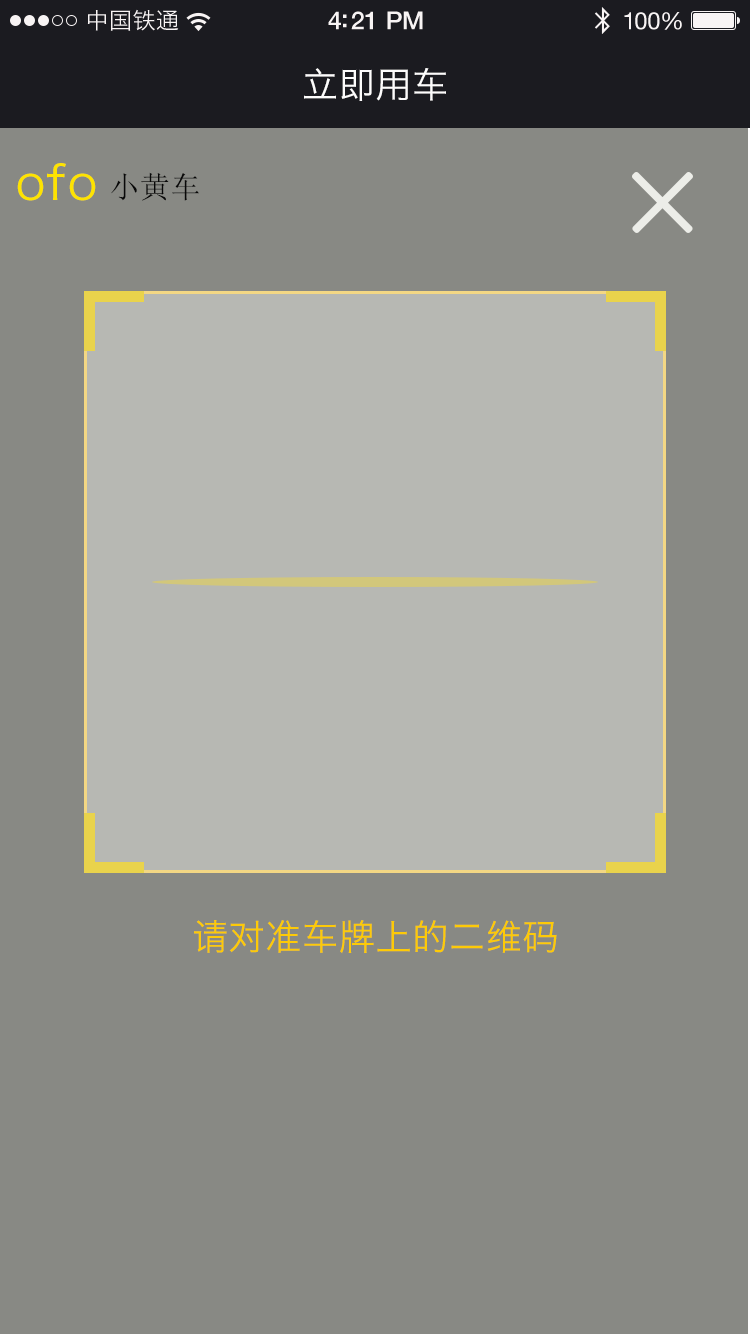
<style>
.page{position:relative;width:750px;height:1334px;background:#888984}
.page>*{position:absolute;margin:0}
.t1{font:23px "HiraginoSansGB-W3";letter-spacing:0.02em;color:#f8f4f4}
.t2{font:25px "HelveticaNeue-Medium";letter-spacing:-0.02em;color:#f8f4f4}
.t3{font:24px "HelveticaNeue";letter-spacing:-0.02em;color:#f8f4f4}
.t4{font:36px "HiraginoSansGB-W3";letter-spacing:0.02em;color:#fdfcfc}
.t5{font:48px "HiraginoSansGB-W3";letter-spacing:0.02em;color:#fee300}
.t6{font:30px "SimSun";letter-spacing:0.02em;color:#080808}
.t7{font:36px "HiraginoSansGB-W3";letter-spacing:0.02em;color:#fdca07}
</style>
<div class="page">
<p class="t1" style="left:87px;top:9px;width:92px;height:22px">中国铁通</p>
<p class="t2" style="left:328px;top:11px;width:95px;height:19px">4:21 PM</p>
<p class="t3" style="left:624px;top:12px;width:58px;height:18px">100%</p>
<p class="t4" style="left:304px;top:68px;width:142px;height:33px">立即用车</p>
<p class="t5" style="left:17px;top:163px;width:79px;height:38px">ofo</p>
<p class="t6" style="left:111px;top:172px;width:88px;height:29px">小黄车</p>
<p class="t7" style="left:194px;top:920px;width:363px;height:34px">请对准车牌上的二维码</p>
</div>
